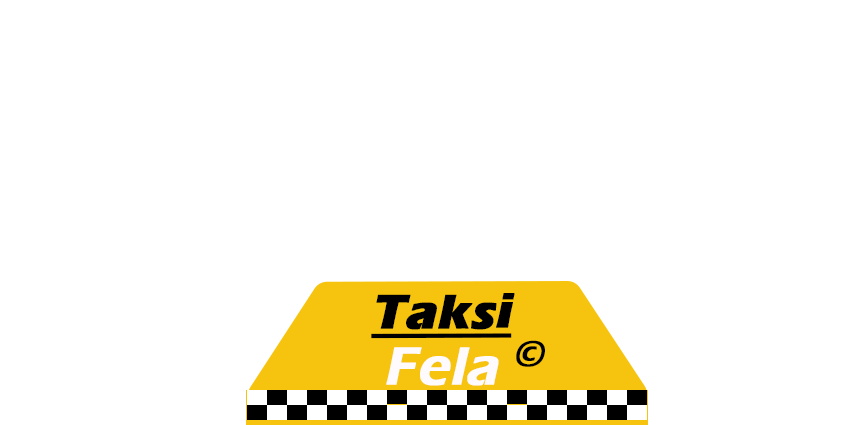
<style>
.page{position:relative;width:850px;height:425px;background:#ffffff}
.page>*{position:absolute;margin:0}
.t1{font:50px "ErasITC-Bold";color:#000000;font-weight:bold;font-style:italic;text-decoration:underline}
.t2{font:36.7px "ErasITC-Demi";color:#000000;font-weight:bold;font-style:italic}
.t3{font:55.3px "ErasITC-Demi";color:#fffafb;font-weight:bold;font-style:italic}
</style>
<div class="page">
<p class="t1" style="left:371px;top:293px;width:144px;height:46px">Taksi</p>
<p class="t2" style="left:516px;top:340px;width:29px;height:27px;rotate:-1deg">©</p>
<p class="t3" style="left:386px;top:347px;width:113px;height:39px">Fela</p>
</div>
